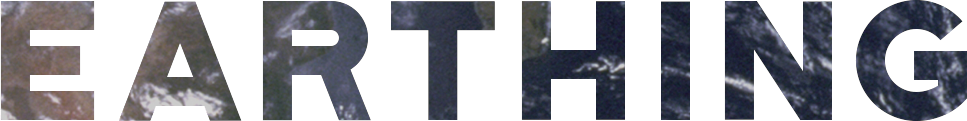
<style>
.page{position:relative;width:967px;height:121px;background:#ffffff}
.page>*{position:absolute;margin:0}
.t1{font:170px "BourbonGrotesque-Regular"}
</style>
<div class="page">
<p class="t1" style="left:0px;top:0px;width:967px;height:121px">EARTHING</p>
</div>
